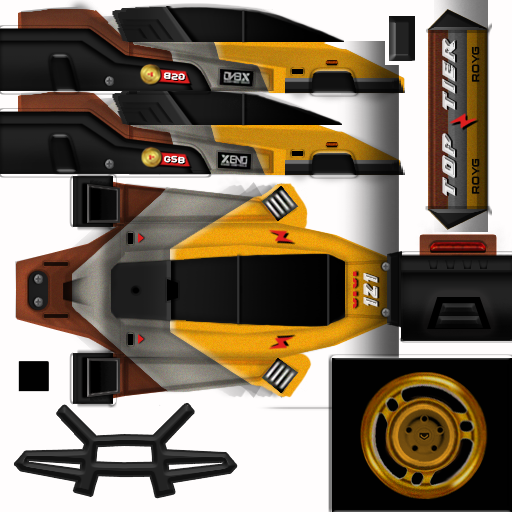
<style>
.page{position:relative;width:512px;height:512px;background:#fffdfd}
.page>*{position:absolute;margin:0}
.t1{font:18.9px "Thunderstrike";letter-spacing:0.075em;font-weight:bold;scale:1.47 1}
.t2{font:9.8px "ConthraxSb-Regular";letter-spacing:0.075em;color:#050505;font-weight:bold;scale:0.94 1}
.t3{font:9.7px "AristaProTrial-Bold";color:#ffffff;scale:1.35 1}
.t4{font:4.5px "CarbonBl-Regular";letter-spacing:0.075em;color:#dd1f1f;font-weight:bold;scale:4.6 1}
.t5{font:20.5px "Thunderstrike";letter-spacing:0.075em;font-weight:bold;scale:0.9 1}
</style>
<div class="page">
<p class="t1" style="left:442px;top:38px;width:13px;height:72px;rotate:-90deg">tier</p>
<p class="t2" style="left:471px;top:46px;width:9px;height:36px;rotate:-90deg">ROYG</p>
<p class="t3" style="left:163px;top:72px;width:22px;height:8px;rotate:-177deg">GSB</p>
<p class="t1" style="left:442px;top:133px;width:13px;height:63px;rotate:-90deg">top</p>
<p class="t3" style="left:164px;top:155px;width:21px;height:9px;rotate:3deg">GSB</p>
<p class="t2" style="left:471px;top:158px;width:9px;height:36px;rotate:-90deg">ROYG</p>
<p class="t4" style="left:353px;top:271px;width:4px;height:38px;rotate:-90deg">VIVI</p>
<p class="t5" style="left:363px;top:273px;width:15px;height:34px;rotate:-90deg">121</p>
</div>
